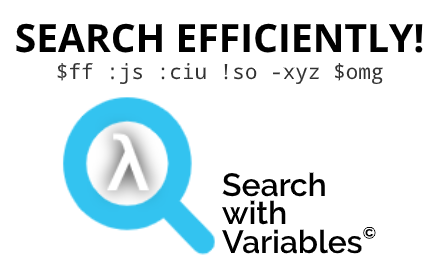
<style>
.page{position:relative;width:440px;height:280px;background:#ffffff}
.page>*{position:absolute;margin:0}
.t1{font:39px "OpenSans-Bold";color:#000000}
.t2{font:21px "DroidSansMono";color:#323232}
.t3{font:32px "Raleway-SemiBold";color:#000000}
.t4{font:28px "Raleway-SemiBold";color:#000000}
</style>
<div class="page">
<p class="t1" style="left:16px;top:23px;width:407px;height:30px">SEARCH EFFICIENTLY!</p>
<p class="t2" style="left:57px;top:62px;width:326px;height:23px">$ff :js :ciu !so -xyz $omg</p>
<p class="t3" style="left:222px;top:172px;width:154px;height:82px">Search<br>with<br>Variables<span class="t4">©</span></p>
</div>
